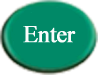
<style>
.page{position:relative;width:98px;height:75px;background:#008967}
.page>*{position:absolute;margin:0}
.t1{font:24px "TimesNewRomanPSMT";letter-spacing:-0.025em;color:#f9fcfb;font-weight:bold}
</style>
<div class="page">
<p class="t1" style="left:23px;top:26px;width:53px;height:17px">Enter</p>
</div>
